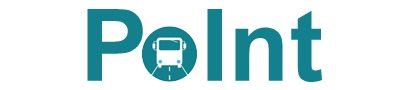
<style>
.page{position:relative;width:398px;height:90px;background:#ffffff}
.page>*{position:absolute;margin:0}
.t1{font:100px "Arial-BoldMT";color:#13818d}
</style>
<div class="page">
<p class="t1" style="left:87px;top:9px;width:235px;height:73px">P  Int</p>
</div>
